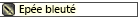
<style>
.page{position:relative;width:140px;height:19px;background:#ffffff}
.page>*{position:absolute;margin:0}
.t1{font:10.9px "LaoUI";color:#000000}
</style>
<div class="page">
<p class="t1" style="left:19px;top:4px;width:57px;height:11px">Epée bleuté</p>
</div>
